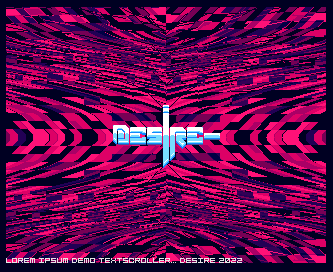
<style>
.page{position:relative;width:333px;height:272px;background:#000022}
.page>*{position:absolute;margin:0}
.t1{font:8px "SquareDance10";color:#e6e6e6}
</style>
<div class="page">
<p class="t1" style="left:6px;top:258px;width:236px;height:5px">LOREM IPSUM DEMO TEXTSCROLLER... DESIRE 2022</p>
</div>
